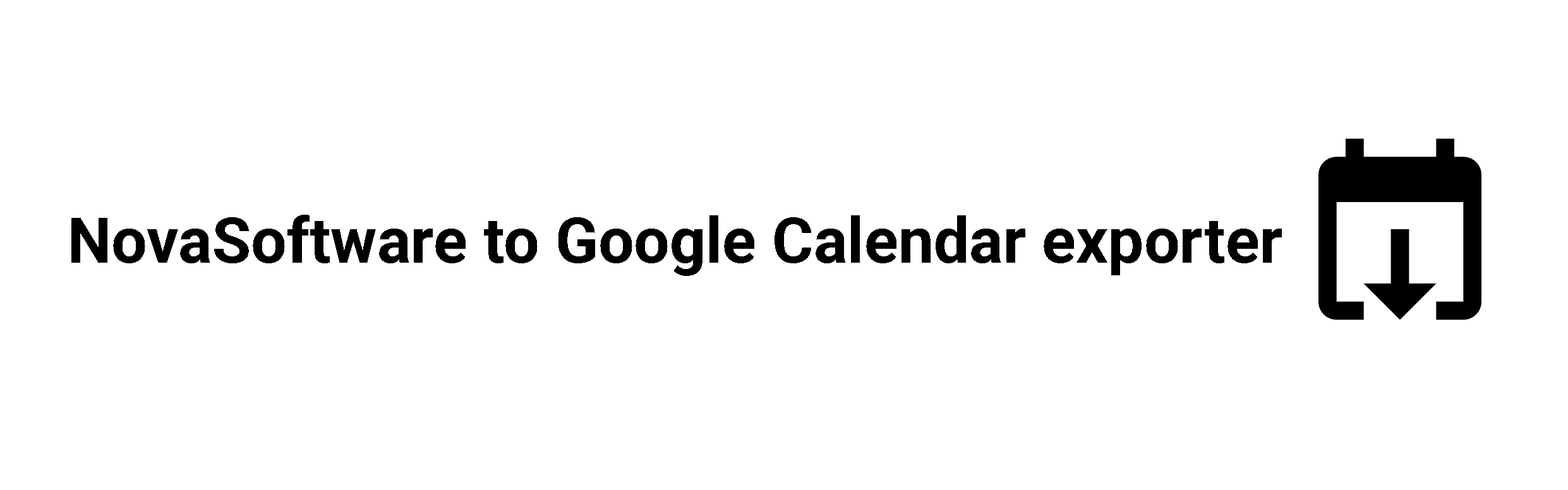
<style>
.page{position:relative;width:1568px;height:490px;background:#ffffff}
.page>*{position:absolute;margin:0}
.t1{font:63.2px "Roboto-Bold";color:#000000}
</style>
<div class="page">
<p class="t1" style="left:71px;top:215px;width:1211px;height:61px">NovaSoftware to Google Calendar exporter</p>
</div>
